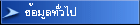
<style>
.page{position:relative;width:140px;height:25px}
.page>*{position:absolute;margin:0}
.t1{font:15.3px "EucrosiaDSE";color:#ffffff;scale:1.12 1}
</style>
<div class="page">
<p class="t1" style="left:25px;top:3px;width:51px;height:16px">¢éÍÁÙÅ·ÑèÇä»</p>
</div>
